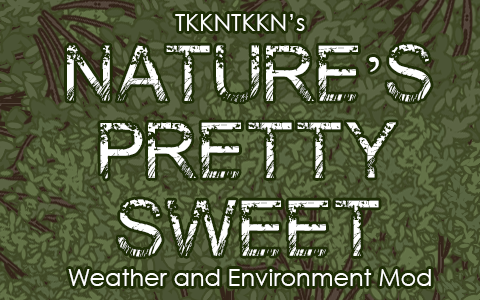
<style>
.page{position:relative;width:480px;height:300px}
.page>*{position:absolute;margin:0}
.t1{font:24px "CenturyGothic";color:#ffffff}
.t2{font:64.6px "Nature";color:#ffffff}
.t3{font:64.6px "TimesNewRomanPSMT";color:#ffffff}
</style>
<div class="page">
<p class="t1" style="left:175px;top:14px;width:130px;height:17px">TKKNTKKN’s</p>
<p class="t2" style="left:67px;top:44px;width:364px;height:213px;text-align:center">NATURE<span class="t3">’</span>S<br>PRETTY<br>SWEET</p>
<p class="t1" style="left:68px;top:269px;width:363px;height:17px">Weather and Environment Mod</p>
</div>
